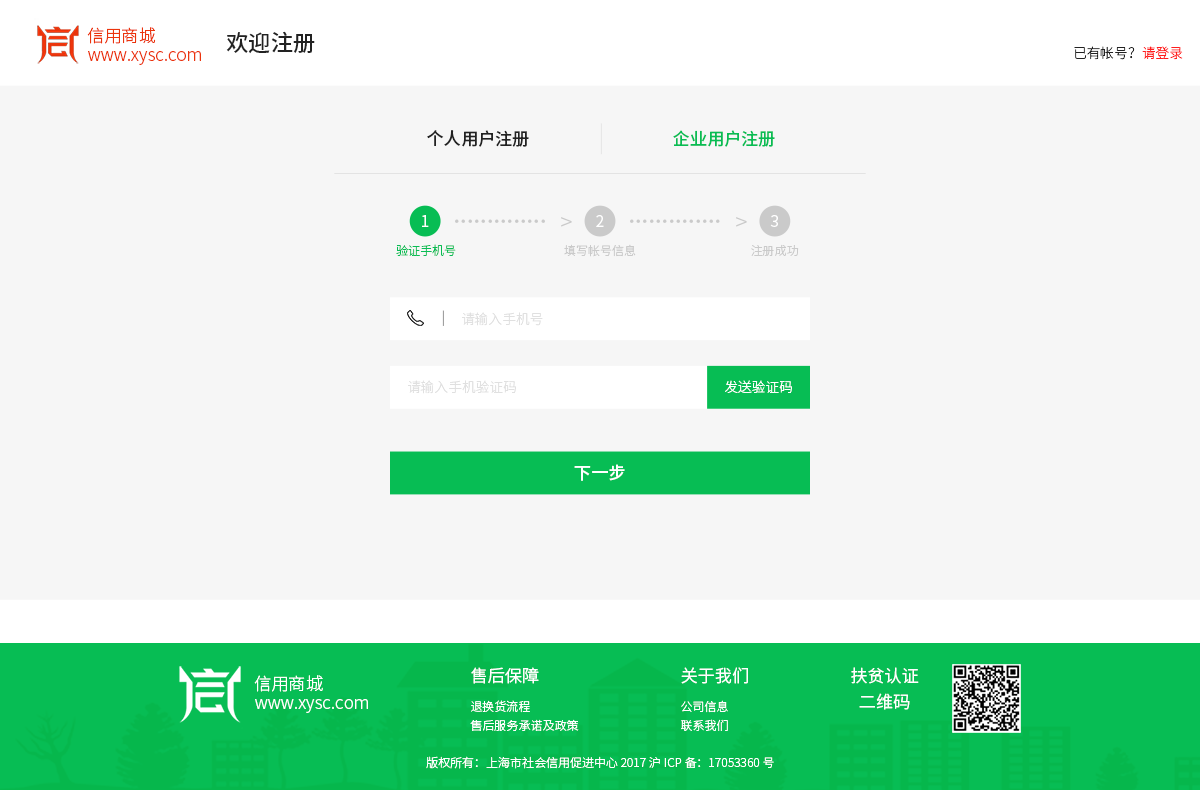
<style>
.page{position:relative;width:1200px;height:790px;background:#f6f6f6}
.page>*{position:absolute;margin:0}
.t1{font:17.1px/18.9px "SourceHanSansCN-Light";color:#eb340c}
.t2{font:22.3px "SourceHanSansCN-Medium";color:#222222}
.t3{font:13.7px "SourceHanSansCN-Light";color:#222222}
.t4{font:13.7px "SourceHanSansCN-Light";color:#ff1d1d}
.t5{font:17.1px "SourceHanSansCN-Medium";color:#222222}
.t6{font:17.1px "SourceHanSansCN-Medium";color:#07bd54}
.t7{font:15.4px "SourceHanSansCN-Normal";color:#ffffff}
.t8{font:22.3px "SourceHanSansCN-Medium";color:#cacaca}
.t9{font:22.3px "SourceHanSansCN-Light";color:#cacaca}
.t10{font:12px "SourceHanSansCN-Light";color:#07bd54}
.t11{font:12px "SourceHanSansCN-Light";color:#cacaca}
.t12{font:13.7px "SourceHanSansCN-Light";color:#a0a0a0}
.t13{font:13.7px "SourceHanSansCN-Light";color:#e0e0e0}
.t14{font:13.7px "SourceHanSansCN-Light";color:#ffffff}
.t15{font:17.1px "SourceHanSansCN-Medium";color:#ffffff}
.t16{font:17.1px/18.9px "SourceHanSansCN-Light";color:#ffffff}
.t17{font:17.1px "SourceHanSansCN-Normal";color:#ffffff}
.t18{font:17.1px/25.7px "SourceHanSansCN-Normal";color:#ffffff}
.t19{font:12px/18.9px "SourceHanSansCN-Light";color:#ffffff}
.t20{font:12px "SourceHanSansCN-Light";color:#ffffff}
</style>
<div class="page">
<p class="t1" style="left:87px;top:27px;width:114px;height:38px">信用商城<br>www.xysc.com</p>
<p class="t2" style="left:226px;top:31px;width:89px;height:23px">欢迎注册</p>
<p class="t3" style="left:1074px;top:46px;width:109px;height:14px">已有帐号？<span class="t4">请登录</span></p>
<p class="t5" style="left:427px;top:130px;width:102px;height:17px">个人用户注册</p>
<p class="t6" style="left:673px;top:130px;width:102px;height:17px">企业用户注册</p>
<p class="t7" style="left:422px;top:215px;width:7px;height:12px">1</p>
<p class="t8" style="left:455px;top:219px;width:90px;height:4px">..............</p>
<p class="t9" style="left:561px;top:217px;width:11px;height:10px">&gt;</p>
<p class="t7" style="left:596px;top:215px;width:8px;height:12px">2</p>
<p class="t8" style="left:630px;top:219px;width:90px;height:4px">..............</p>
<p class="t9" style="left:736px;top:217px;width:11px;height:10px">&gt;</p>
<p class="t7" style="left:770px;top:215px;width:8px;height:12px">3</p>
<p class="t10" style="left:396px;top:244px;width:60px;height:12px">验证手机号</p>
<p class="t11" style="left:564px;top:244px;width:72px;height:13px">填写帐号信息</p>
<p class="t11" style="left:751px;top:244px;width:48px;height:12px">注册成功</p>
<p class="t12" style="left:442px;top:310px;width:2px;height:16px">|</p>
<p class="t13" style="left:462px;top:312px;width:81px;height:14px">请输入手机号</p>
<p class="t13" style="left:408px;top:380px;width:108px;height:14px">请输入手机验证码</p>
<p class="t14" style="left:725px;top:380px;width:67px;height:13px">发送验证码</p>
<p class="t15" style="left:574px;top:464px;width:51px;height:17px">下一步</p>
<p class="t16" style="left:254px;top:675px;width:114px;height:38px">信用商城<br>www.xysc.com</p>
<p class="t17" style="left:471px;top:667px;width:68px;height:17px">售后保障</p>
<p class="t17" style="left:681px;top:667px;width:67px;height:17px">关于我们</p>
<p class="t18" style="left:851px;top:667px;width:68px;height:43px;text-align:center">扶贫认证<br>二维码</p>
<p class="t19" style="left:470px;top:700px;width:109px;height:31px">退换货流程<br>售后服务承诺及政策</p>
<p class="t19" style="left:681px;top:700px;width:47px;height:31px">公司信息<br>联系我们</p>
<p class="t20" style="left:426px;top:756px;width:348px;height:13px">版权所有：上海市社会信用促进中心 2017 沪 ICP 备：17053360 号</p>
</div>
